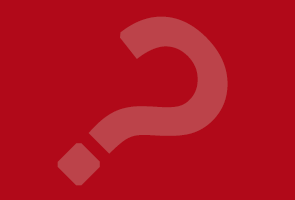
<style>
.page{position:relative;width:295px;height:200px;background:#b10919}
.page>*{position:absolute;margin:0}
.t1{font:260px "ArialMT";color:#bc434a;font-weight:bold}
</style>
<div class="page">
<p class="t1" style="left:57px;top:16px;width:171px;height:170px;rotate:45deg">?</p>
</div>
